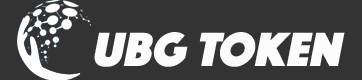
<style>
.page{position:relative;width:362px;height:80px;background:#333333}
.page>*{position:absolute;margin:0}
.t1{font:49.8px "Phosphate-Solid";color:#fcfcfc;font-style:italic}
</style>
<div class="page">
<p class="t1" style="left:94px;top:32px;width:251px;height:35px">UBG TOKEN</p>
</div>
